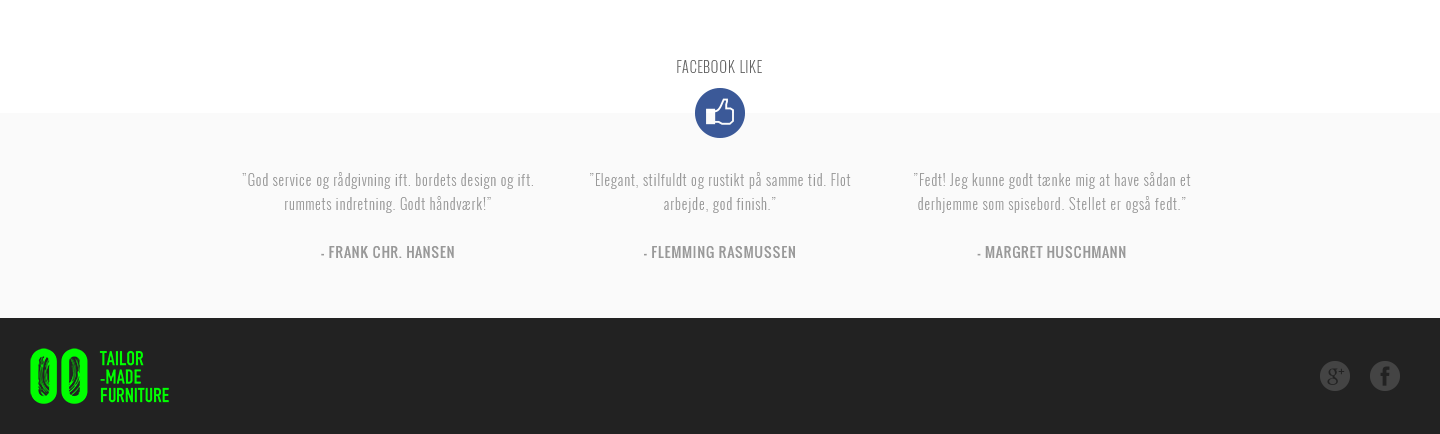
<style>
.page{position:relative;width:1440px;height:434px;background:#fafafa}
.page>*{position:absolute;margin:0}
.t1{font:14px "Oswald-Light";letter-spacing:0.05em;color:#666666;text-transform:uppercase}
.t2{font:14px/24px "Oswald-Light";letter-spacing:0.05em;color:#999999}
.t3{font:14px/24px "Oswald-Regular";letter-spacing:0.05em;color:#999999}
</style>
<div class="page">
<p class="t1" style="left:677px;top:60px;width:85px;height:13px">Facebook Like</p>
<p class="t2" style="left:242px;top:172px;width:291px;height:86px;text-align:center">”God service og rådgivning ift. bordets design og ift. rummets indretning. Godt håndværk!”<br><br><span class="t3">- FRANK CHR. HANSEN</span></p>
<p class="t2" style="left:590px;top:172px;width:261px;height:86px;text-align:center">”Elegant, stilfuldt og rustikt på samme tid. Flot arbejde, god finish.”<br><br><span class="t3">- FLEMMING RASMUSSEN</span></p>
<p class="t2" style="left:914px;top:172px;width:277px;height:86px;text-align:center">”Fedt! Jeg kunne godt tænke mig at have sådan et derhjemme som spisebord. Stellet er også fedt.”<br><br><span class="t3">- MARGRET HUSCHMANN</span></p>
</div>
